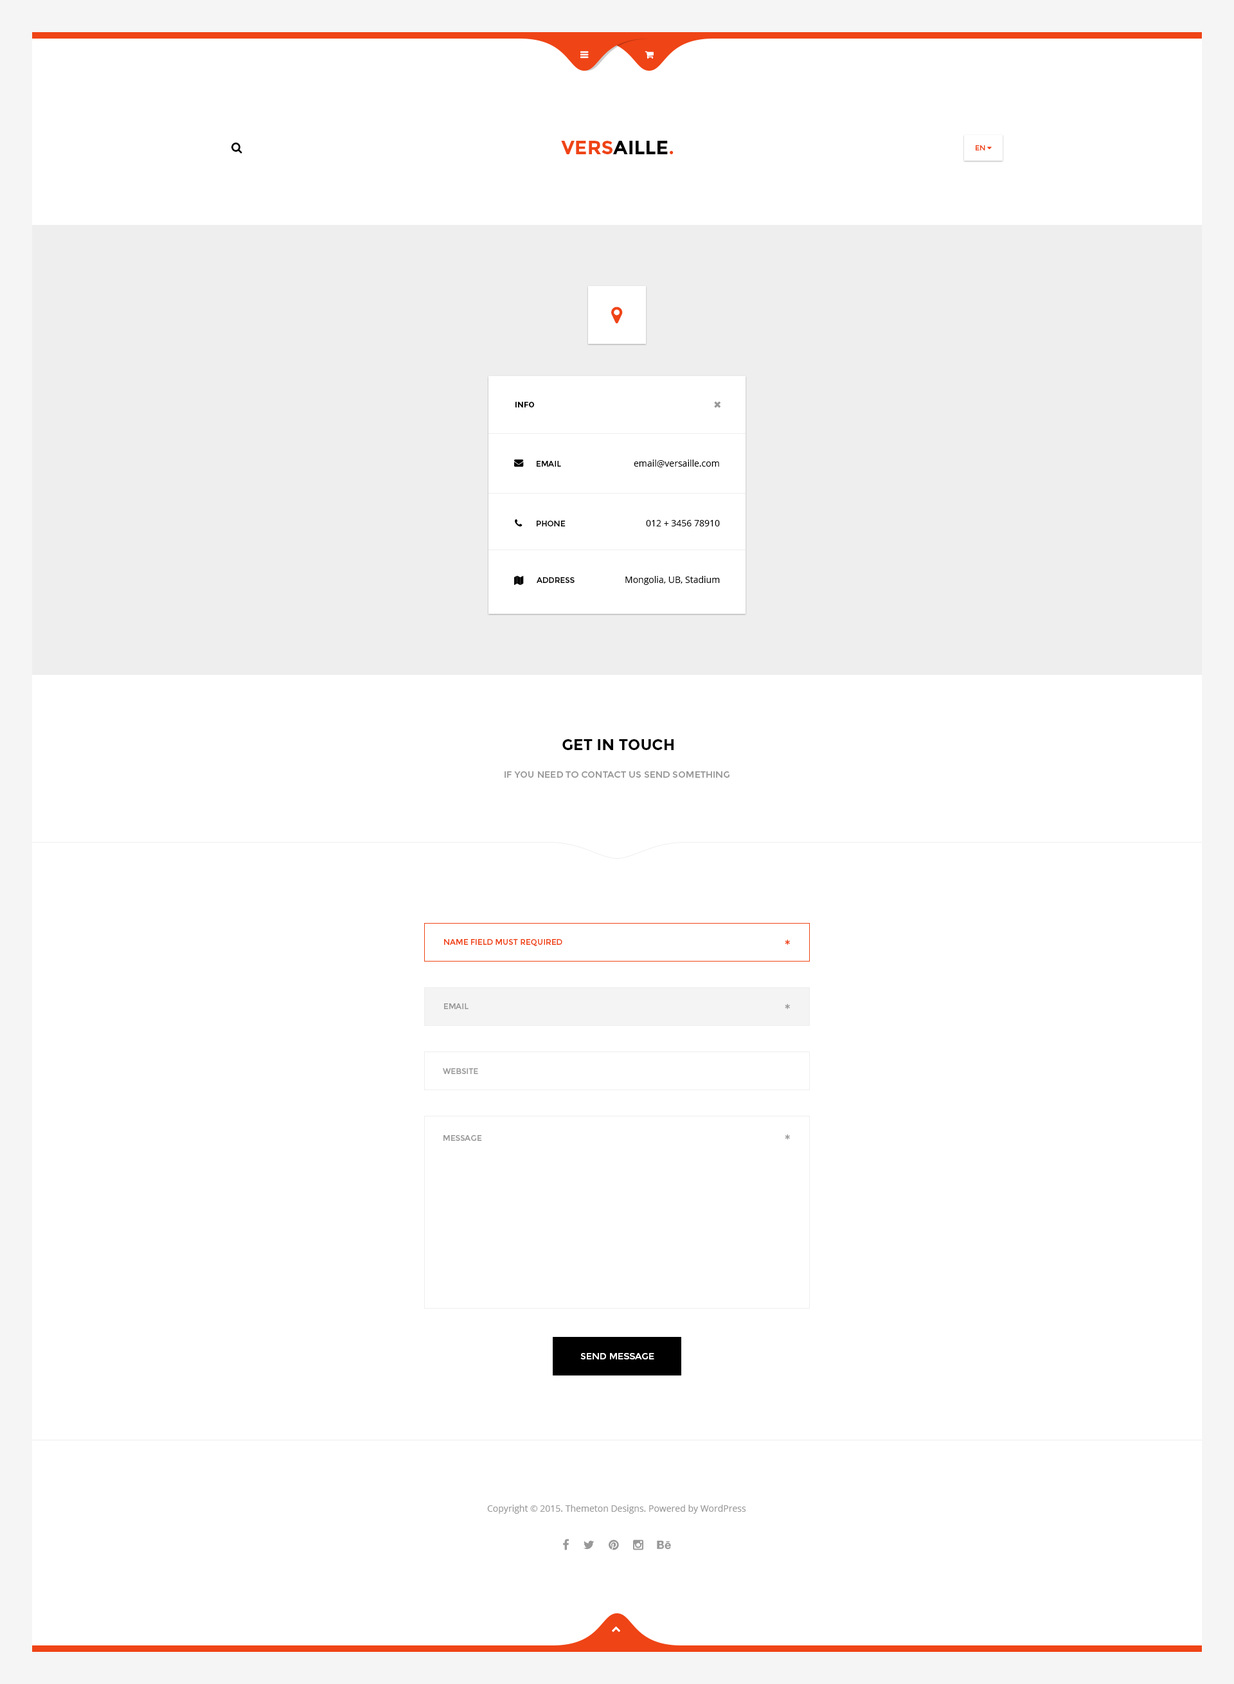
<style>
.page{position:relative;width:1234px;height:1684px;background:#ffffff}
.page>*{position:absolute;margin:0}
.t1{font:19.3px "Montserrat-Bold";color:#000000}
.t2{font:19.3px "Montserrat-Bold";color:#ef4416}
.t3{font:7.7px "Montserrat-Bold";color:#000000}
.t4{font:7.7px "Montserrat-Regular";color:#000000}
.t5{font:9px "OpenSans";color:#000000}
.t6{font:15.4px "Montserrat-Bold";color:#000000;text-transform:uppercase}
.t7{font:9px "Montserrat-Regular";color:#999999}
.t8{font:7.7px "Montserrat-Regular";color:#ef4416}
.t9{font:15.4px "Montserrat-Regular";color:#ef4416;text-transform:uppercase}
.t10{font:7.7px "Montserrat-Regular";color:#999999}
.t11{font:15.4px "Montserrat-Regular";color:#999999;text-transform:uppercase}
.t12{font:9px "Montserrat-Regular";color:#ffffff}
.t13{font:9px "OpenSans";color:#999999}
</style>
<div class="page">
<p class="t1" style="left:561px;top:141px;width:113px;height:13px"><span class="t2">VERS</span>AILLE<span class="t2">.</span></p>
<p class="t3" style="left:515px;top:402px;width:20px;height:6px">INFO</p>
<p class="t4" style="left:537px;top:461px;width:24px;height:6px">EMAIL</p>
<p class="t5" style="left:634px;top:460px;width:85px;height:7px">email@versaille.com</p>
<p class="t4" style="left:537px;top:521px;width:29px;height:5px">PHONE</p>
<p class="t5" style="left:646px;top:520px;width:74px;height:6px">012 + 3456 78910</p>
<p class="t4" style="left:537px;top:577px;width:38px;height:6px">ADDRESS</p>
<p class="t5" style="left:626px;top:576px;width:94px;height:9px">Mongolia, UB, Stadium</p>
<p class="t6" style="left:562px;top:739px;width:112px;height:11px">GET IN TOUCH</p>
<p class="t7" style="left:505px;top:771px;width:225px;height:7px">IF YOU NEED TO CONTACT US SEND SOMETHING</p>
<p class="t8" style="left:444px;top:939px;width:118px;height:7px">NAME FIELD MUST REQUIRED</p>
<p class="t9" style="left:785px;top:940px;width:5px;height:5px">*</p>
<p class="t10" style="left:444px;top:1004px;width:25px;height:5px">EMAIL</p>
<p class="t11" style="left:785px;top:1004px;width:5px;height:5px">*</p>
<p class="t10" style="left:443px;top:1068px;width:35px;height:6px">WEBSITE</p>
<p class="t10" style="left:444px;top:1135px;width:38px;height:6px">MESSAGE</p>
<p class="t11" style="left:785px;top:1135px;width:5px;height:5px">*</p>
<p class="t12" style="left:580px;top:1353px;width:74px;height:7px">SEND MESSAGE</p>
<p class="t13" style="left:487px;top:1505px;width:259px;height:9px">Copyright © 2015. Themeton Designs. Powered by WordPress</p>
</div>
